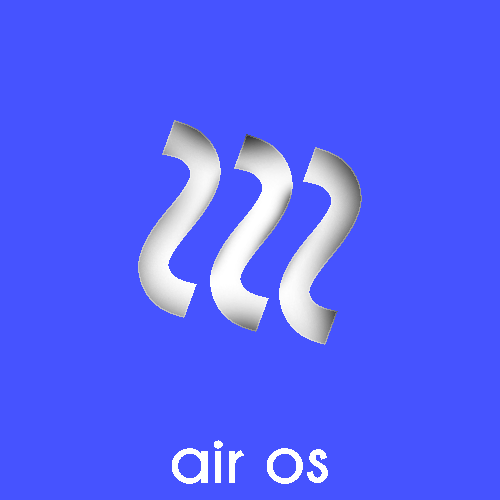
<style>
.page{position:relative;width:500px;height:500px;background:#4653ff}
.page>*{position:absolute;margin:0}
.t1{font:399.3px "Champagne&Limousines-Bold"}
.t2{font:72px "Champagne&Limousines-Bold";color:#ffffff}
</style>
<div class="page">
<p class="t1" style="left:138px;top:120px;width:83px;height:198px;rotate:-79deg">~</p>
<p class="t1" style="left:210px;top:134px;width:83px;height:198px;rotate:-79deg">~</p>
<p class="t1" style="left:279px;top:147px;width:83px;height:198px;rotate:-79deg">~</p>
<p class="t2" style="left:172px;top:440px;width:156px;height:44px">air os</p>
</div>
